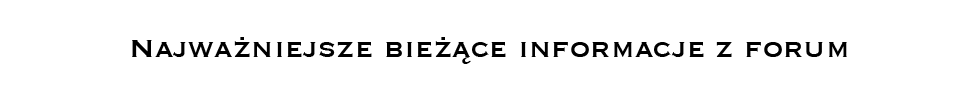
<style>
.page{position:relative;width:980px;height:100px;background:#ffffff}
.page>*{position:absolute;margin:0}
.t1{font:33.3px "Copperplate";color:#000000}
</style>
<div class="page">
<p class="t1" style="left:132px;top:37px;width:715px;height:27px">Najważniejsze bieżące informacje z forum</p>
</div>
